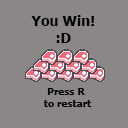
<style>
.page{position:relative;width:128px;height:128px;background:#8c8787}
.page>*{position:absolute;margin:0}
.t1{font:14px "Tahoma-Bold";color:#000000}
.t2{font:10px "Tahoma-Bold";color:#000000}
</style>
<div class="page">
<p class="t1" style="left:31px;top:15px;width:63px;height:28px;text-align:center">You Win!<br>:D</p>
<p class="t2" style="left:43px;top:88px;width:49px;height:19px;text-align:center">Press R <br>to restart</p>
</div>
